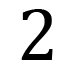
<style>
.page{position:relative;width:72px;height:72px;background:#ffffff}
.page>*{position:absolute;margin:0}
.t1{font:75px "CambriaMath";color:#000000}
</style>
<div class="page">
<p class="t1" style="left:21px;top:9px;width:32px;height:51px">2</p>
</div>
